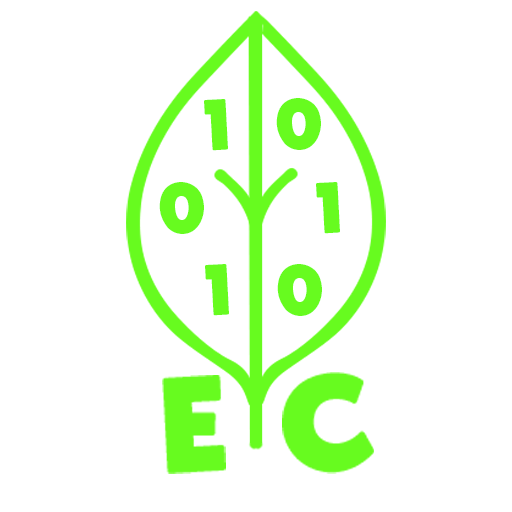
<style>
.page{position:relative;width:512px;height:512px;background:#ffffff}
.page>*{position:absolute;margin:0}
.t1{font:61.1px "YurukaStd-UB";color:#67fb1f}
</style>
<div class="page">
<p class="t1" style="left:204px;top:99px;width:24px;height:52px">1</p>
<p class="t1" style="left:276px;top:98px;width:45px;height:52px">0</p>
<p class="t1" style="left:159px;top:182px;width:45px;height:52px">0</p>
<p class="t1" style="left:316px;top:182px;width:24px;height:52px">1</p>
<p class="t1" style="left:205px;top:264px;width:24px;height:52px">1</p>
<p class="t1" style="left:277px;top:264px;width:45px;height:52px">0</p>
</div>
